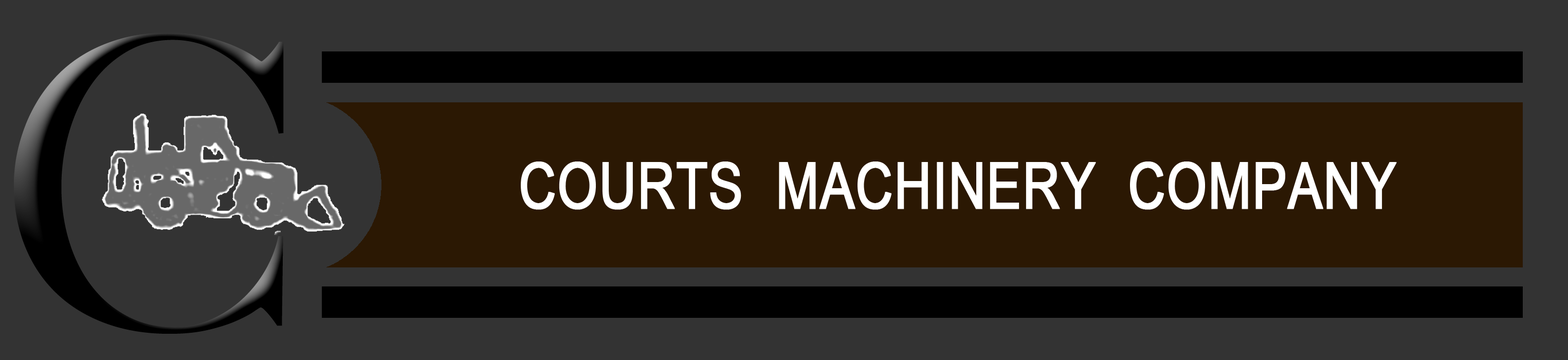
<style>
.page{position:relative;width:1568px;height:360px;background:#333333}
.page>*{position:absolute;margin:0}
.t1{font:407px "BigCaslon-Medium";color:#000000;scale:0.95 1}
.t2{font:64.3px "ArialMT";color:#ffffff;font-weight:bold;scale:0.8 1}
</style>
<div class="page">
<p class="t1" style="left:14px;top:33px;width:270px;height:301px">C</p>
<p class="t2" style="left:521px;top:161px;width:876px;height:49px">COURTS  MACHINERY  COMPANY</p>
</div>
